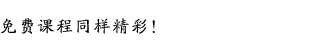
<style>
.page{position:relative;width:313px;height:50px;background:#ffffff}
.page>*{position:absolute;margin:0}
.t1{font:17px "FZBWKSJW--GB1-0";letter-spacing:0.1em;color:#000000}
</style>
<div class="page">
<p class="t1" style="left:0px;top:18px;width:155px;height:16px">免费课程同样精彩！</p>
</div>
